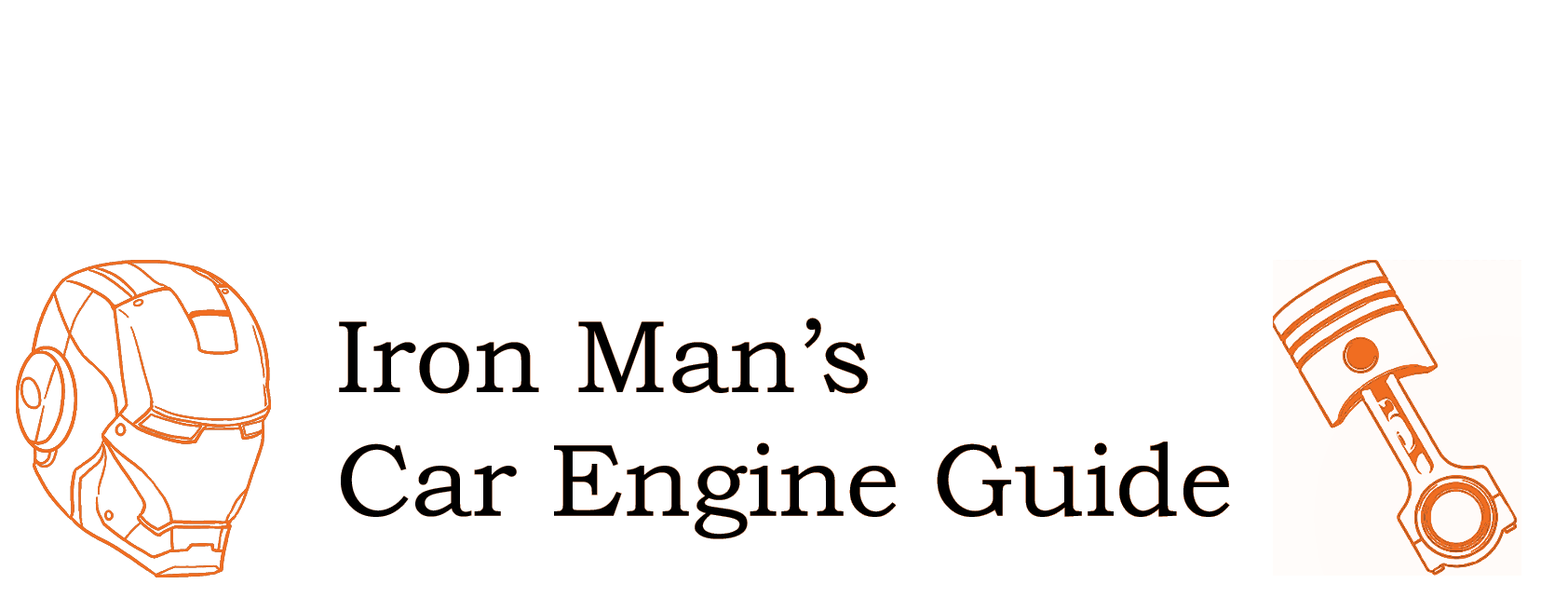
<style>
.page{position:relative;width:1568px;height:611px;background:#ffffff}
.page>*{position:absolute;margin:0}
.t1{font:102.9px "BookmanOldStyle";color:#000000}
</style>
<div class="page">
<p class="t1" style="left:339px;top:318px;width:891px;height:221px">Iron Man’s<br>Car Engine Guide</p>
</div>
